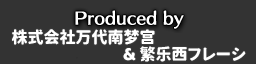
<style>
.page{position:relative;width:256px;height:64px;background:#333333}
.page>*{position:absolute;margin:0}
.t1{font:16px "JiangChengYuanTi-700W";color:#ffffff}
</style>
<div class="page">
<p class="t1" style="left:12px;top:29px;width:143px;height:16px">株式会社万代南梦宫</p>
<p class="t1" style="left:123px;top:46px;width:123px;height:16px">&amp; 繁乐西フレーシ</p>
</div>
